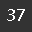
<style>
.page{position:relative;width:32px;height:32px;background:#333333}
.page>*{position:absolute;margin:0}
.t1{font:17.8px "MyriadPro-Regular";color:#ffffff;scale:1.12 1}
</style>
<div class="page">
<p class="t1" style="left:7px;top:9px;width:18px;height:12px">37</p>
</div>
